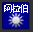
<style>
.page{position:relative;width:33px;height:32px;background:#000090}
.page>*{position:absolute;margin:0}
.t1{font:10.4px "SimSun";letter-spacing:-0.25em;color:#ffffff}
</style>
<div class="page">
<p class="t1" style="left:4px;top:4px;width:24px;height:9px">阿拉伯</p>
</div>
